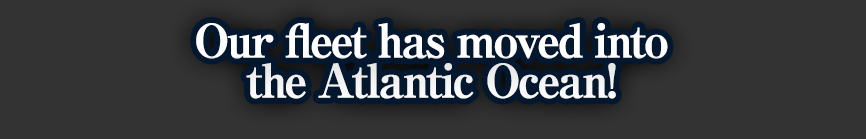
<style>
.page{position:relative;width:866px;height:139px;background:#333333}
.page>*{position:absolute;margin:0}
.t1{font:46px/40px "RyuminPro-ExBold";letter-spacing:-0.08em;color:#ffffff;font-weight:bold}
</style>
<div class="page">
<p class="t1" style="left:196px;top:23px;width:472px;height:76px;text-align:center">Our fleet has moved into<br>the Atlantic Ocean!</p>
</div>
